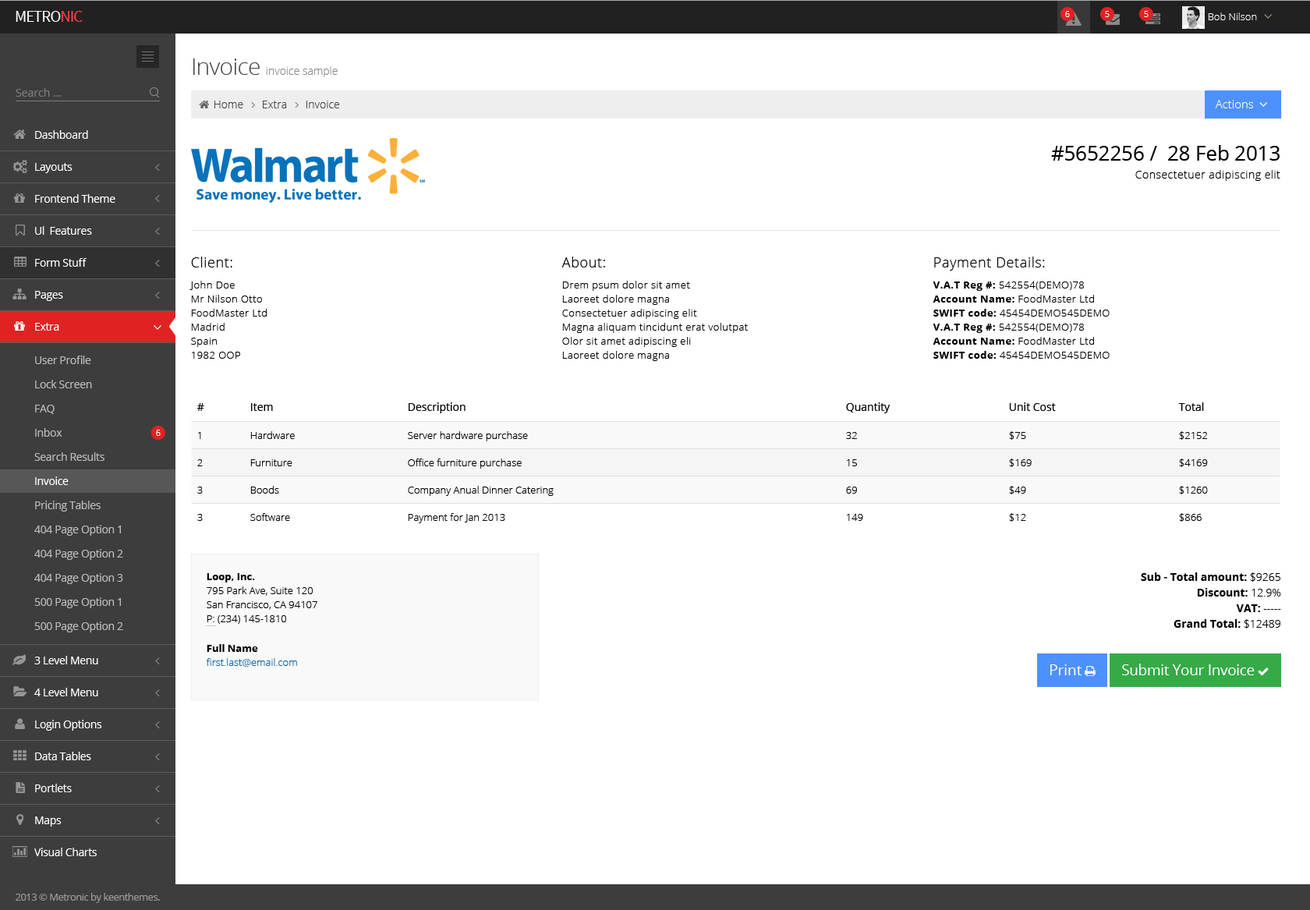
<style>
.page{position:relative;width:1310px;height:910px;background:#ffffff}
.page>*{position:absolute;margin:0}
.t1{font:16.3px "SourceSansPro-Regular";letter-spacing:-0.045em;color:#ffffff;text-transform:uppercase}
.t2{font:16.3px "SourceSansPro-Regular";letter-spacing:-0.045em;color:#ff3f3f;text-transform:uppercase}
.t3{font:8.6px "OpenSans-Light";color:#ffffff}
.t4{font:10.1px "OpenSans-Light";color:#ffffff}
.t5{font:23.4px "OpenSans-Light";letter-spacing:-0.025em;color:#444444}
.t6{font:10.9px "OpenSans-Light";color:#888888}
.t7{font:10.9px "OpenSans";color:#7d7d7d}
.t8{font:10.9px "OpenSans-Light";color:#444444}
.t9{font:11.7px "OpenSans-Light";color:#ffffff}
.t10{font:10.9px "OpenSans";letter-spacing:-0.025em;color:#ffffff}
.t11{font:20.3px "OpenSans";letter-spacing:-0.005em;color:#000000}
.t12{font:10.9px "OpenSans-Light";letter-spacing:0.035em;color:#000000}
.t13{font:10.1px/14.4px "OpenSans-Light";letter-spacing:0.035em;color:#000000}
.t14{font:14px "OpenSans-Light";letter-spacing:0.035em;color:#000000}
.t15{font:10.1px/20.7px "OpenSans-Light";letter-spacing:0.035em;color:#000000}
.t16{font:10.1px/13.6px "OpenSans-Light";letter-spacing:0.035em;color:#000000}
.t17{font:10.1px/20.7px "OpenSans-Bold";letter-spacing:0.035em;color:#000000}
.t18{font:10.1px/14.4px "OpenSans-Bold";letter-spacing:0.035em;color:#000000}
.t19{font:10.1px/13.6px "OpenSans-Bold";letter-spacing:0.035em;color:#000000}
.t20{font:10.9px "OpenSans";letter-spacing:-0.025em;color:#bdbdbd}
.t21{font:10.9px/20.7px "OpenSans";letter-spacing:0.035em;color:#000000}
.t22{font:10.1px/7.4px "OpenSans-Light";letter-spacing:0.035em;color:#000000}
.t23{font:10.1px/26.9px "OpenSans-Light";letter-spacing:0.055em;color:#000000}
.t24{font:10.1px/27.7px "OpenSans-Light";letter-spacing:0.035em;color:#000000}
.t25{font:10.1px/26.9px "OpenSans-Light";letter-spacing:0.035em;color:#000000}
.t26{font:10.1px/26.9px "OpenSans-Light";color:#000000}
.t27{font:10.9px/20.7px "OpenSans";color:#000000}
.t28{font:10.1px/7.4px "OpenSans-Light";color:#000000}
.t29{font:10.1px/27.7px "OpenSans-Light";color:#000000}
.t30{font:10.9px "OpenSans";letter-spacing:-0.025em;color:#fefefe}
.t31{font:10.1px/13.6px "OpenSans-Light";color:#000000}
.t32{font:10.1px "OpenSans-Bold";color:#000000}
.t33{font:10.1px/14.4px "OpenSans-Light";color:#000000}
.t34{font:10.1px/16px "OpenSans-Bold";color:#000000}
.t35{font:10.1px/14.4px "OpenSans-Light";color:#0d63a9}
.t36{font:10.9px/15.6px "OpenSans-Bold";color:#000000}
.t37{font:10.9px/15.6px "OpenSans-Light";color:#000000}
.t38{font:14.8px "OpenSans";color:#ffffff}
.t39{font:14.8px "OpenSans";letter-spacing:-0.015em;color:#ffffff}
.t40{font:10.1px "OpenSans";letter-spacing:-0.04em;color:#999999}
</style>
<div class="page">
<p class="t1" style="left:16px;top:11px;width:67px;height:11px">Metro<span class="t2">nic</span></p>
<p class="t3" style="left:1065px;top:11px;width:5px;height:6px">6</p>
<p class="t3" style="left:1105px;top:11px;width:5px;height:6px">5</p>
<p class="t3" style="left:1144px;top:11px;width:5px;height:6px">5</p>
<p class="t4" style="left:1208px;top:12px;width:49px;height:8px">Bob Nilson</p>
<p class="t5" style="left:193px;top:58px;width:67px;height:17px">Invoice</p>
<p class="t6" style="left:266px;top:66px;width:72px;height:11px">invoice sample</p>
<p class="t7" style="left:16px;top:88px;width:46px;height:9px">Search ...</p>
<p class="t8" style="left:214px;top:101px;width:29px;height:7px">Home</p>
<p class="t8" style="left:263px;top:101px;width:24px;height:7px">Extra</p>
<p class="t8" style="left:306px;top:101px;width:33px;height:7px">Invoice</p>
<p class="t9" style="left:1215px;top:100px;width:39px;height:8px">Actions</p>
<p class="t10" style="left:35px;top:130px;width:53px;height:9px">Dashboard</p>
<p class="t11" style="left:1051px;top:145px;width:229px;height:16px">#5652256 /  28 Feb 2013</p>
<p class="t10" style="left:35px;top:163px;width:38px;height:10px">Layouts</p>
<p class="t12" style="left:1136px;top:170px;width:145px;height:11px">Consectetuer adipiscing elit</p>
<p class="t10" style="left:35px;top:194px;width:80px;height:9px">Frontend Theme</p>
<p class="t10" style="left:35px;top:226px;width:57px;height:9px">Ul  Features</p>
<p class="t13" style="left:190px;top:257px;width:77px;height:102px"><span class="t14">Client:<br></span><span class="t15">John Doe<br></span>Mr Nilson Otto<br><span class="t16">FoodMaster Ltd<br></span>Madrid<br><span class="t16">Spain<br></span>1982 OOP</p>
<p class="t13" style="left:562px;top:257px;width:186px;height:104px"><span class="t14">About:<br></span><span class="t15">Drem psum dolor sit amet<br></span>Laoreet dolore magna<br><span class="t16">Consectetuer adipiscing elit<br></span>Magna aliquam tincidunt erat volutpat<br><span class="t16">Olor sit amet adipiscing eli<br></span>Laoreet dolore magna</p>
<p class="t14" style="left:933px;top:257px;width:177px;height:102px">Payment Details:<br><span class="t17">V.A.T Reg #: </span><span class="t15">542554(DEMO)78<br></span><span class="t18">Account Name:</span><span class="t13"> FoodMaster Ltd<br></span><span class="t19">SWIFT code: </span><span class="t16">45454DEMO545DEMO<br></span><span class="t18">V.A.T Reg #:</span><span class="t13"> 542554(DEMO)78<br></span><span class="t19">Account Name: </span><span class="t16">FoodMaster Ltd<br></span><span class="t18">SWIFT code: </span><span class="t13">45454DEMO545DEMO</span></p>
<p class="t10" style="left:35px;top:258px;width:52px;height:9px">Form Stuff</p>
<p class="t10" style="left:35px;top:291px;width:28px;height:10px">Pages</p>
<p class="t10" style="left:35px;top:323px;width:24px;height:8px">Extra</p>
<p class="t20" style="left:35px;top:356px;width:56px;height:8px">User Profile</p>
<p class="t20" style="left:35px;top:380px;width:57px;height:8px">Lock Screen</p>
<p class="t20" style="left:35px;top:405px;width:20px;height:9px">FAQ</p>
<p class="t21" style="left:197px;top:403px;width:7px;height:118px">#<br><br><span class="t22">1<br></span><span class="t23">2<br></span><span class="t24">3<br></span><span class="t25">3</span></p>
<p class="t26" style="left:250px;top:403px;width:45px;height:118px"><span class="t27">Item<br><br></span><span class="t28">Hardware<br></span>Furniture<br><span class="t29">Boods<br></span>Software</p>
<p class="t29" style="left:408px;top:402px;width:146px;height:121px"><span class="t27">Description<br><br></span><span class="t28">Server hardware purchase<br></span><span class="t26">Office furniture purchase<br></span>Company Anual Dinner Catering<br><span class="t26">Payment for Jan 2013</span></p>
<p class="t27" style="left:846px;top:402px;width:45px;height:119px">Quantity<br><br><span class="t28">32<br></span><span class="t26">15<br></span><span class="t29">69<br></span><span class="t26">149</span></p>
<p class="t27" style="left:1009px;top:402px;width:47px;height:120px">Unit Cost<br><br><span class="t28">$75<br></span><span class="t26">$169<br></span><span class="t29">$49<br></span><span class="t26">$12</span></p>
<p class="t27" style="left:1178px;top:402px;width:30px;height:120px">Total<br><br><span class="t28">$2152<br></span><span class="t26">$4169<br></span><span class="t29">$1260<br></span><span class="t26">$866</span></p>
<p class="t20" style="left:35px;top:428px;width:27px;height:9px">Inbox</p>
<p class="t3" style="left:156px;top:430px;width:5px;height:6px">6</p>
<p class="t20" style="left:34px;top:452px;width:71px;height:9px">Search Results</p>
<p class="t30" style="left:35px;top:477px;width:34px;height:8px">Invoice</p>
<p class="t20" style="left:35px;top:501px;width:66px;height:11px">Pricing Tables</p>
<p class="t20" style="left:34px;top:525px;width:87px;height:11px">404 Page Option 1</p>
<p class="t20" style="left:34px;top:549px;width:89px;height:11px">404 Page Option 2</p>
<p class="t20" style="left:34px;top:573px;width:89px;height:11px">404 Page Option 3</p>
<p class="t31" style="left:206px;top:573px;width:111px;height:94px"><span class="t32">Loop, Inc.<br></span>795 Park Ave, Suite 120<br><span class="t33">San Francisco, CA 94107<br></span>P: (234) 145-1810<br><br><span class="t34">Full Name<br></span><span class="t35">first.last@email.com</span></p>
<p class="t36" style="left:1141px;top:572px;width:140px;height:57px;text-align:right">Sub - Total amount: <span class="t37">$9265<br></span>Discount: <span class="t37">12.9%<br></span>VAT: <span class="t37">-----<br></span>Grand Total: <span class="t37">$12489</span></p>
<p class="t20" style="left:34px;top:597px;width:87px;height:11px">500 Page Option 1</p>
<p class="t20" style="left:34px;top:622px;width:89px;height:10px">500 Page Option 2</p>
<p class="t10" style="left:34px;top:656px;width:64px;height:8px">3 Level Menu</p>
<p class="t38" style="left:1050px;top:664px;width:32px;height:11px">Print</p>
<p class="t39" style="left:1122px;top:664px;width:133px;height:11px">Submit Your Invoice</p>
<p class="t10" style="left:34px;top:688px;width:64px;height:8px">4 Level Menu</p>
<p class="t10" style="left:35px;top:720px;width:67px;height:11px">Login Options</p>
<p class="t10" style="left:35px;top:752px;width:56px;height:8px">Data Tables</p>
<p class="t10" style="left:35px;top:784px;width:37px;height:8px">Portlets</p>
<p class="t10" style="left:35px;top:817px;width:27px;height:10px">Maps</p>
<p class="t10" style="left:34px;top:848px;width:63px;height:8px">Visual Charts</p>
<p class="t40" style="left:16px;top:893px;width:144px;height:10px">2013 © Metronic by keenthemes.</p>
</div>
